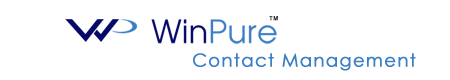
<style>
.page{position:relative;width:450px;height:80px;background:#ffffff}
.page>*{position:absolute;margin:0}
.t1{font:5.8px "ArialMT";letter-spacing:0.05em;font-weight:bold}
.t2{font:31.7px "QTAvanti";color:#3c7fc3}
.t3{font:31.7px "QTAvanti";color:#050969}
.t4{font:18px "CenturyGothic";letter-spacing:0.05em;color:#3c7fc3;font-weight:bold}
</style>
<div class="page">
<p class="t1" style="left:269px;top:16px;width:9px;height:5px">TM</p>
<p class="t2" style="left:151px;top:19px;width:126px;height:25px"><span class="t3">Win</span>Pure</p>
<p class="t4" style="left:193px;top:53px;width:223px;height:18px">Contact Management</p>
</div>
